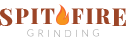
<style>
.page{position:relative;width:126px;height:45px;background:#ffffff}
.page>*{position:absolute;margin:0}
.t1{font:20.9px "PlayfairDisplay-Black";letter-spacing:0.08em;color:#9c4527}
.t2{font:23.9px "PlayfairDisplay-Black";letter-spacing:0.08em;color:#9c4527}
.t3{font:9.8px "Lato-Light";letter-spacing:0.08em}
</style>
<div class="page">
<p class="t1" style="left:0px;top:8px;width:55px;height:18px"><span class="t2">S</span>PIT</p>
<p class="t1" style="left:71px;top:8px;width:55px;height:18px">FIR<span class="t2">E</span></p>
<p class="t3" style="left:27px;top:29px;width:73px;height:8px">G R I N D I N G</p>
</div>
